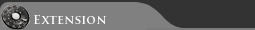
<style>
.page{position:relative;width:255px;height:30px;background:#808080}
.page>*{position:absolute;margin:0}
.t1{font:12px "TrajanPro-Bold";color:#ffffff;scale:1.05 1}
</style>
<div class="page">
<p class="t1" style="left:33px;top:15px;width:73px;height:9px">Extension</p>
</div>
